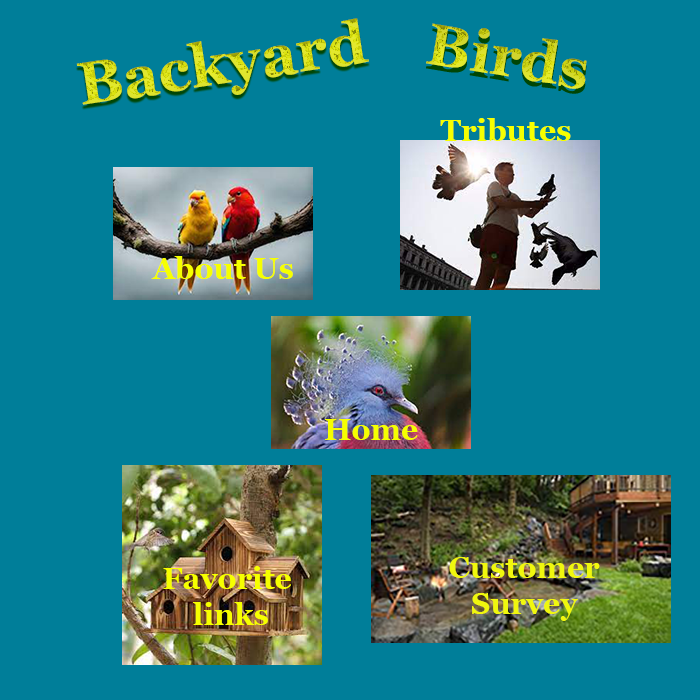
<style>
.page{position:relative;width:700px;height:700px;background:#007e99}
.page>*{position:absolute;margin:0}
.t1{font:60px "Georgia-Bold"}
.t2{font:58.3px "Georgia-Bold"}
.t3{font:30px "Georgia-Bold";color:#f6ff00}
.t4{font:30px "Georgia-Bold";color:#f0f70e}
</style>
<div class="page">
<p class="t1" style="left:76px;top:18px;width:293px;height:87px;rotate:-9deg">Backyard</p>
<p class="t2" style="left:426px;top:23px;width:161px;height:66px;rotate:10deg">Birds</p>
<p class="t3" style="left:440px;top:118px;width:131px;height:23px">Tributes</p>
<p class="t3" style="left:151px;top:256px;width:142px;height:23px">About Us</p>
<p class="t3" style="left:325px;top:419px;width:93px;height:21px">Home</p>
<p class="t4" style="left:449px;top:557px;width:151px;height:64px;text-align:center">Customer<br>Survey</p>
<p class="t3" style="left:163px;top:566px;width:128px;height:59px;text-align:center">Favorite <br>links</p>
</div>
